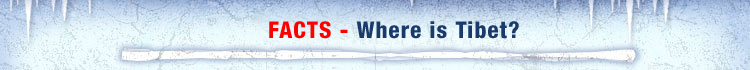
<style>
.page{position:relative;width:750px;height:70px}
.page>*{position:absolute;margin:0}
.t1{font:23px "HelveticaNeueLT-HeavyCond";letter-spacing:0.05em;color:#1a3a6c}
.t2{font:23px "HelveticaNeueLT-HeavyCond";letter-spacing:0.05em;color:#ff0000}
</style>
<div class="page">
<p class="t1" style="left:269px;top:21px;width:250px;height:18px"><span class="t2">FACTS - </span>Where is Tibet?</p>
</div>
